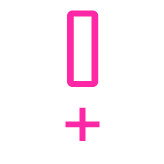
<style>
.page{position:relative;width:164px;height:164px;background:#ffffff}
.page>*{position:absolute;margin:0}
.t1{font:100px "AgencyFB-Reg";color:#fe27a5}
</style>
<div class="page">
<p class="t1" style="left:67px;top:10px;width:32px;height:77px">0</p>
<p class="t1" style="left:65px;top:107px;width:35px;height:34px">+</p>
</div>
